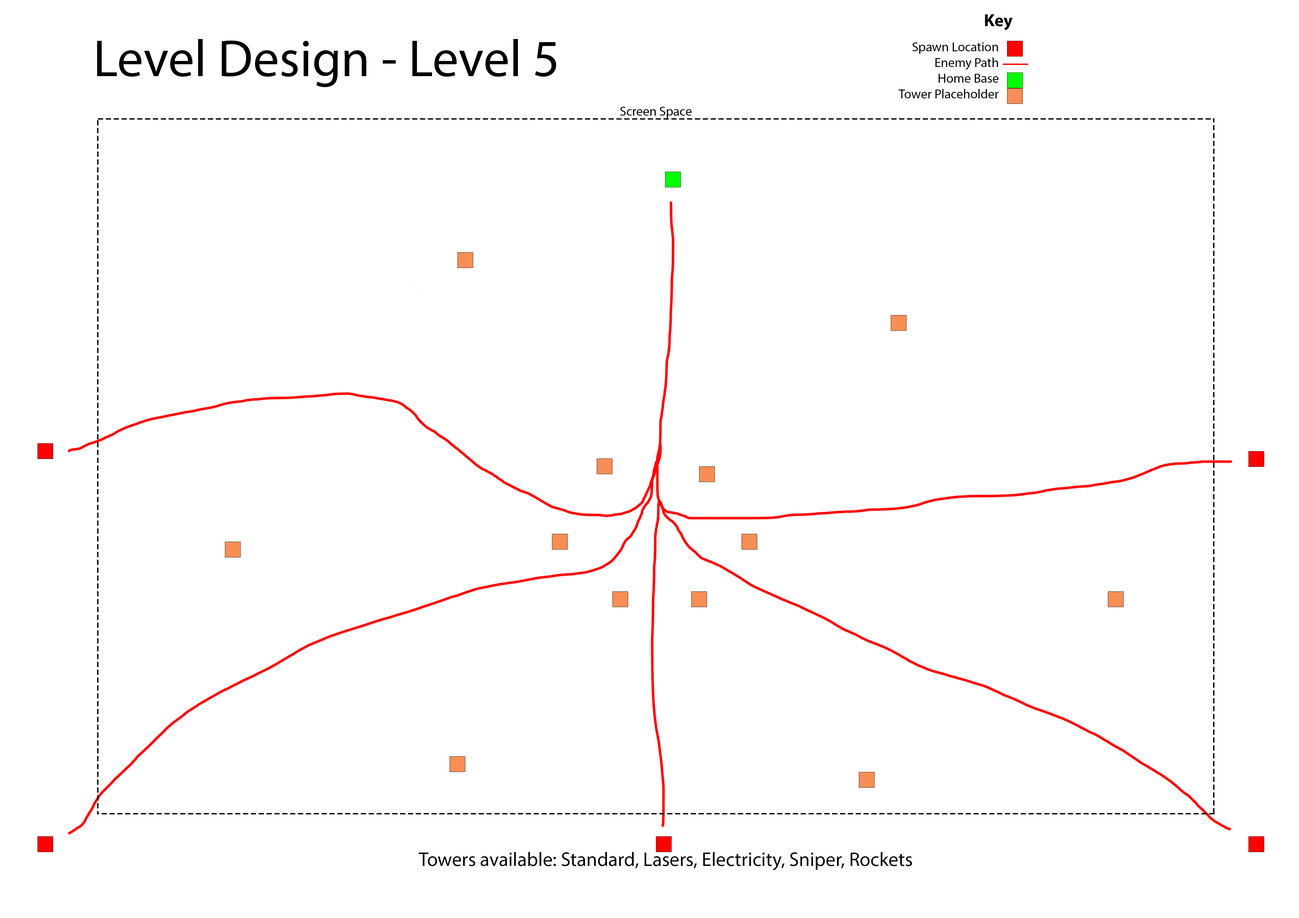
<style>
.page{position:relative;width:1299px;height:918px;background:#ffffff}
.page>*{position:absolute;margin:0}
.t1{font:17.5px "MyriadPro-Bold";color:#000000}
.t2{font:52.4px "MyriadPro-Regular";color:#000000}
.t3{font:13.1px "MyriadPro-Regular";color:#000000}
.t4{font:3.1px "MyriadPro-Regular";color:#000000}
.t5{font:19.6px "MyriadPro-Regular";color:#000000}
</style>
<div class="page">
<p class="t1" style="left:985px;top:14px;width:27px;height:16px">Key</p>
<p class="t2" style="left:97px;top:39px;width:459px;height:48px">Level Design - Level 5</p>
<p class="t3" style="left:898px;top:42px;width:100px;height:56px;text-align:right">Spawn Location<br>Enemy Path<br>Home Base<br>Tower Placeholder</p>
<p class="t4" style="left:620px;top:107px;width:72px;height:11px">Screen Space</p>
<p class="t5" style="left:419px;top:852px;width:493px;height:19px">Towers available: Standard, Lasers, Electricity, Sniper, Rockets</p>
</div>
